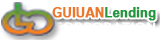
<style>
.page{position:relative;width:160px;height:40px;background:#ffffff}
.page>*{position:absolute;margin:0}
.t1{font:13px "Arial-BoldMT";letter-spacing:-0.025em;color:#23973e;font-weight:bold}
.t2{font:13px "Arial-BoldMT";letter-spacing:-0.025em;color:#eb7929;font-weight:bold}
</style>
<div class="page">
<p class="t1" style="left:52px;top:7px;width:104px;height:14px"><span class="t2">GUIUAN</span>Lending</p>
</div>
